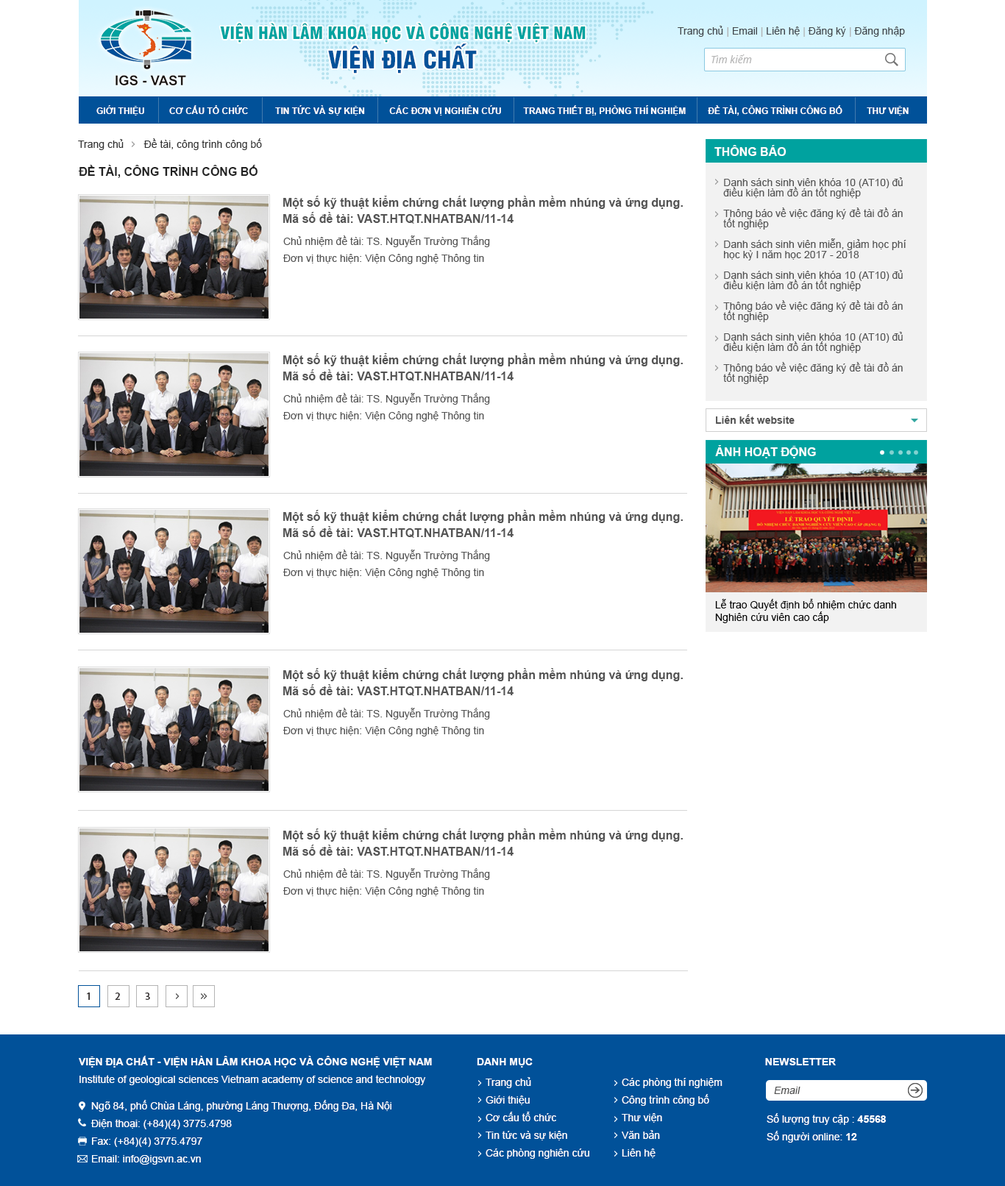
<style>
.page{position:relative;width:1005px;height:1186px;background:#ffffff}
.page>*{position:absolute;margin:0}
.t1{font:16.6px "UTM-Swiss-721-Black-Condensed";color:#00a3a0;text-transform:uppercase}
.t2{font:10.3px "ArialMT";color:#43484c}
.t3{font:10.3px "ArialMT";color:#b1b1b1}
.t4{font:23.8px "UTM-Swiss-721-Black-Condensed";color:#015199;text-transform:uppercase}
.t5{font:10.3px "OpenSans-Italic";color:#b4b4b4}
.t6{font:8.8px "Arial-BoldMT";color:#fffefe;text-transform:uppercase}
.t7{font:10.3px "ArialMT";color:#323232}
.t8{font:11.8px "Arial-BoldMT";color:#ffffff;text-transform:uppercase}
.t9{font:11.8px "Arial-BoldMT";color:#232323;text-transform:uppercase}
.t10{font:10.3px/10.3px "ArialMT";color:#545454}
.t11{font:11.8px/16.2px "Arial-BoldMT";color:#545454}
.t12{font:10.3px "ArialMT";color:#545454}
.t13{font:10.3px "Arial-BoldMT";color:#535353}
.t14{font:10.3px "ArialMT";color:#000000}
.t15{font:10.3px "MyriadPro-Semibold";letter-spacing:0.2em;color:#312c2c;text-transform:uppercase}
.t16{font:10.3px/17.7px "ArialMT";color:#ffffff}
.t17{font:10.3px/17.7px "Arial-BoldMT";color:#ffffff;text-transform:uppercase}
.t18{font:10.3px "Arial-BoldMT";color:#ffffff;text-transform:uppercase}
.t19{font:10.3px/17.7px "ArialMT";color:#fffefe}
.t20{font:10.3px "ArialMT";color:#4f4f4f;font-style:italic}
.t21{font:10.3px/17.7px "Arial-BoldMT";color:#ffffff}
</style>
<div class="page">
<p class="t1" style="left:220px;top:23px;width:366px;height:20px">viện hàn lâm khoa học và công nghệ Việt nam</p>
<p class="t2" style="left:678px;top:26px;width:227px;height:11px">Trang chủ <span class="t3">| </span>Email <span class="t3">| </span>Liên hệ <span class="t3">|</span> Đăng ký <span class="t3">|</span> Đăng nhập</p>
<p class="t4" style="left:328px;top:43px;width:149px;height:31px">viện địa chất</p>
<p class="t5" style="left:712px;top:54px;width:40px;height:9px">Tìm kiếm</p>
<p class="t6" style="left:96px;top:105px;width:813px;height:11px">Giới thiệu          Cơ cấu tổ chức           Tin tức và sự kiện          các đơn vị nghiên cứu         trang thiết bị, phòng thí nghiệm         đề tài, công trình công bố          Thư viện</p>
<p class="t7" style="left:78px;top:138px;width:184px;height:12px">Trang chủ       Đề tài, công trình công bố</p>
<p class="t8" style="left:715px;top:145px;width:72px;height:11px">thông báo</p>
<p class="t9" style="left:78px;top:165px;width:180px;height:13px">đề tài, công trình công bố</p>
<p class="t10" style="left:723px;top:177px;width:184px;height:207px">Danh sách sinh viên khóa 10 (AT10) đủ điều kiện làm đồ án tốt nghiệp<br><br>Thông báo về việc đăng ký đề tài đồ án tốt nghiệp<br><br>Danh sách sinh viên miễn, giảm học phí học kỳ I năm học 2017 - 2018<br><br>Danh sách sinh viên khóa 10 (AT10) đủ điều kiện làm đồ án tốt nghiệp<br><br>Thông báo về việc đăng ký đề tài đồ án tốt nghiệp<br><br>Danh sách sinh viên khóa 10 (AT10) đủ điều kiện làm đồ án tốt nghiệp<br><br>Thông báo về việc đăng ký đề tài đồ án tốt nghiệp</p>
<p class="t11" style="left:283px;top:196px;width:400px;height:28px">Một số kỹ thuật kiểm chứng chất lượng phần mềm nhúng và ứng dụng. Mã số đề tài: VAST.HTQT.NHATBAN/11-14</p>
<p class="t12" style="left:283px;top:235px;width:207px;height:12px">Chủ nhiệm đề tài: TS. Nguyễn Trường Thắng</p>
<p class="t12" style="left:283px;top:254px;width:201px;height:10px">Đơn vị thực hiện: Viện Công nghệ Thông tin</p>
<p class="t11" style="left:283px;top:353px;width:400px;height:28px">Một số kỹ thuật kiểm chứng chất lượng phần mềm nhúng và ứng dụng. Mã số đề tài: VAST.HTQT.NHATBAN/11-14</p>
<p class="t12" style="left:283px;top:393px;width:207px;height:12px">Chủ nhiệm đề tài: TS. Nguyễn Trường Thắng</p>
<p class="t12" style="left:283px;top:411px;width:201px;height:11px">Đơn vị thực hiện: Viện Công nghệ Thông tin</p>
<p class="t13" style="left:716px;top:414px;width:79px;height:10px">Liên kết website</p>
<p class="t8" style="left:715px;top:445px;width:101px;height:13px">Ảnh hoạt động</p>
<p class="t11" style="left:283px;top:510px;width:400px;height:28px">Một số kỹ thuật kiểm chứng chất lượng phần mềm nhúng và ứng dụng. Mã số đề tài: VAST.HTQT.NHATBAN/11-14</p>
<p class="t12" style="left:283px;top:550px;width:207px;height:11px">Chủ nhiệm đề tài: TS. Nguyễn Trường Thắng</p>
<p class="t12" style="left:283px;top:568px;width:201px;height:10px">Đơn vị thực hiện: Viện Công nghệ Thông tin</p>
<p class="t14" style="left:715px;top:599px;width:181px;height:24px">Lễ trao Quyết định bổ nhiệm chức danh Nghiên cứu viên cao cấp</p>
<p class="t11" style="left:283px;top:668px;width:400px;height:28px">Một số kỹ thuật kiểm chứng chất lượng phần mềm nhúng và ứng dụng. Mã số đề tài: VAST.HTQT.NHATBAN/11-14</p>
<p class="t12" style="left:283px;top:708px;width:207px;height:12px">Chủ nhiệm đề tài: TS. Nguyễn Trường Thắng</p>
<p class="t12" style="left:283px;top:726px;width:201px;height:11px">Đơn vị thực hiện: Viện Công nghệ Thông tin</p>
<p class="t11" style="left:283px;top:829px;width:400px;height:28px">Một số kỹ thuật kiểm chứng chất lượng phần mềm nhúng và ứng dụng. Mã số đề tài: VAST.HTQT.NHATBAN/11-14</p>
<p class="t12" style="left:283px;top:868px;width:207px;height:12px">Chủ nhiệm đề tài: TS. Nguyễn Trường Thắng</p>
<p class="t12" style="left:283px;top:887px;width:201px;height:10px">Đơn vị thực hiện: Viện Công nghệ Thông tin</p>
<p class="t15" style="left:87px;top:993px;width:3px;height:7px">1</p>
<p class="t15" style="left:115px;top:993px;width:5px;height:7px">2</p>
<p class="t15" style="left:145px;top:993px;width:5px;height:7px">3</p>
<p class="t16" style="left:79px;top:1056px;width:353px;height:29px"><span class="t17">viện địa chất - viện hàn lâm khoa học và công nghệ Việt Nam<br></span>Institute of geological sciences Vietnam academy of science and technology</p>
<p class="t18" style="left:477px;top:1058px;width:56px;height:10px">Danh mục</p>
<p class="t18" style="left:765px;top:1058px;width:71px;height:8px">newsletter</p>
<p class="t19" style="left:486px;top:1077px;width:103px;height:82px">Trang chủ<br>Giới thiệu      <br>Cơ cấu tổ chức       <br>Tin tức và sự kiện       <br>Các phòng nghiên cứu</p>
<p class="t19" style="left:622px;top:1078px;width:101px;height:80px">Các phòng thí nghiệm<br>Công trình công bố   <br>Thư viện      <br>Văn bản <br>Liên hệ</p>
<p class="t20" style="left:774px;top:1087px;width:27px;height:7px">Email</p>
<p class="t16" style="left:91px;top:1100px;width:300px;height:65px">Ngõ 84, phố Chùa Láng, phường Láng Thượng, Đống Đa, Hà Nội<br>Điện thoại: (+84)(4) 3775.4798  <br>Fax: (+84)(4) 3775.4797<br>Email: info@igsvn.ac.vn</p>
<p class="t16" style="left:767px;top:1113px;width:119px;height:30px">Số lượng truy cập : <span class="t21">45568<br></span>Số người online: <span class="t21">12</span></p>
</div>
